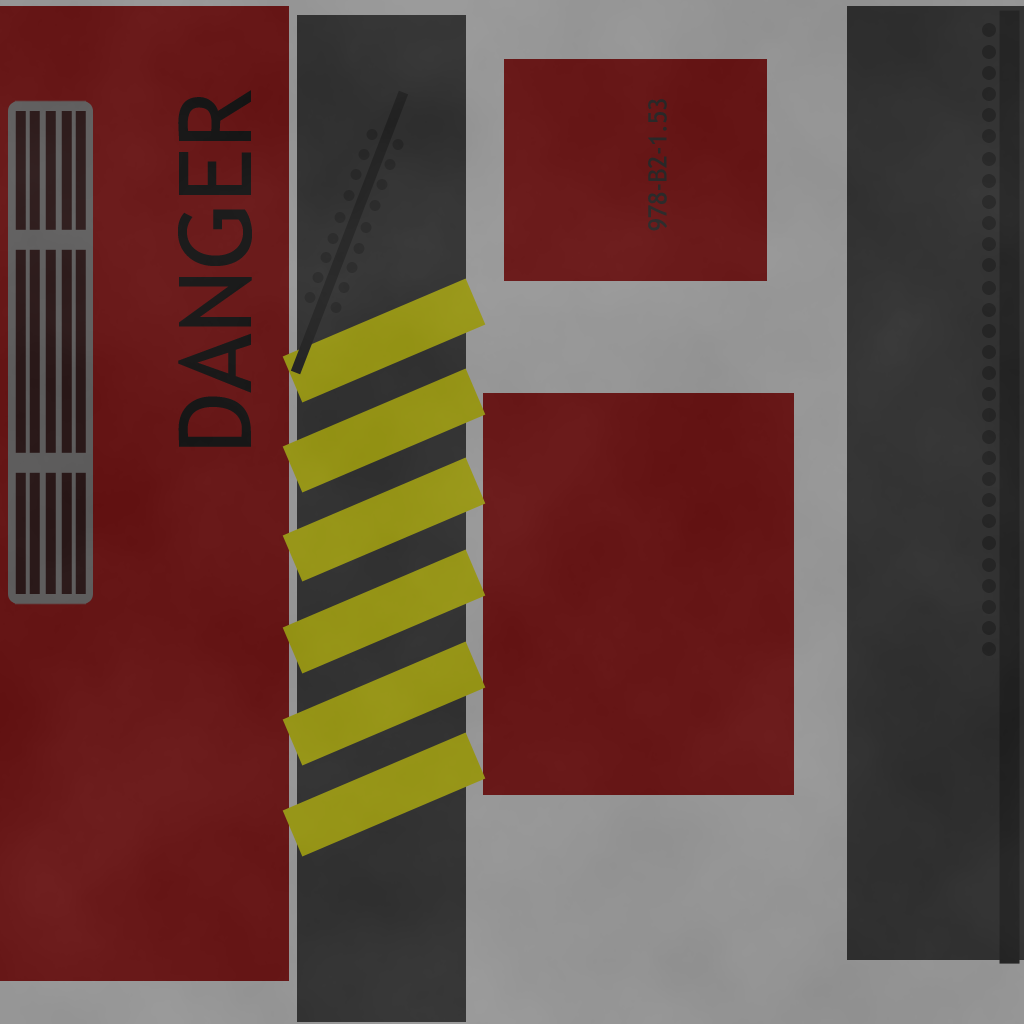
<style>
.page{position:relative;width:1024px;height:1024px}
.page>*{position:absolute;margin:0}
.t1{font:100px "TrebuchetMS";color:#1a1a1a}
.t2{font:25px "TrebuchetMS";color:#252424}
</style>
<div class="page">
<p class="t1" style="left:178px;top:90px;width:74px;height:357px;rotate:-90deg">DANGER</p>
<p class="t2" style="left:648px;top:99px;width:19px;height:132px;rotate:-90deg">978-B2-1.53</p>
</div>
